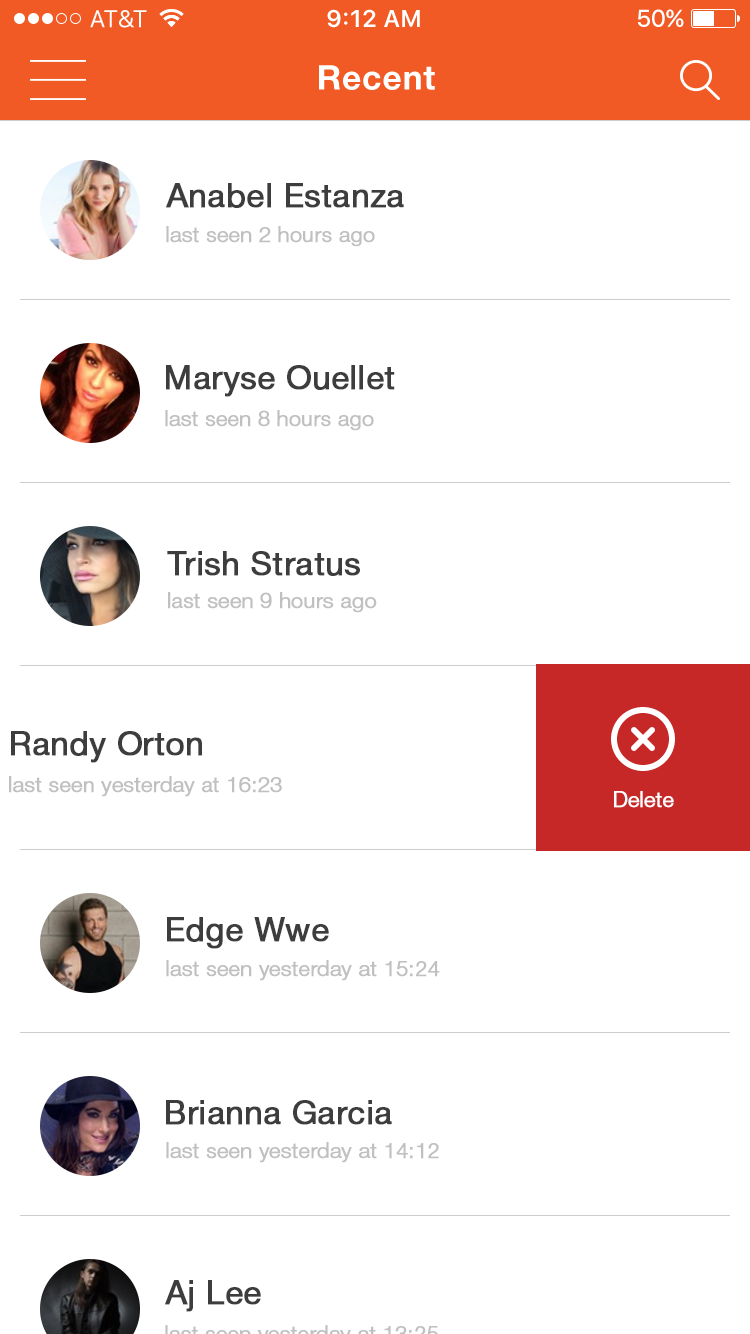
<style>
.page{position:relative;width:750px;height:1334px;background:#ffffff}
.page>*{position:absolute;margin:0}
.t1{font:34px "HelveticaNeueCyr-Bold";letter-spacing:0.02em;color:#ffffff}
.t2{font:32.9px "HelveticaNeueCyr-Roman";color:#3d3d3d;font-weight:bold}
.t3{font:21.4px "HelveticaNeueCyr-Light";color:#c0c0c0;font-weight:bold}
.t4{font:21.4px "HelveticaNeueCyr-Light";color:#ffffff;font-weight:bold}
</style>
<div class="page">
<p class="t1" style="left:319px;top:65px;width:116px;height:25px">Recent</p>
<p class="t2" style="left:166px;top:183px;width:238px;height:25px">Anabel Estanza</p>
<p class="t3" style="left:166px;top:226px;width:209px;height:21px">last seen 2 hours ago</p>
<p class="t2" style="left:166px;top:365px;width:229px;height:32px">Maryse Ouellet</p>
<p class="t3" style="left:165px;top:410px;width:209px;height:21px">last seen 8 hours ago</p>
<p class="t2" style="left:167px;top:551px;width:193px;height:25px">Trish Stratus</p>
<p class="t3" style="left:168px;top:592px;width:209px;height:21px">last seen 9 hours ago</p>
<p class="t2" style="left:11px;top:731px;width:191px;height:32px">Randy Orton</p>
<p class="t3" style="left:9px;top:776px;width:273px;height:21px">last seen yesterday at 16:23</p>
<p class="t4" style="left:614px;top:791px;width:60px;height:17px">Delete</p>
<p class="t2" style="left:167px;top:917px;width:162px;height:32px">Edge Wwe</p>
<p class="t3" style="left:166px;top:960px;width:274px;height:21px">last seen yesterday at 15:24</p>
<p class="t2" style="left:166px;top:1100px;width:226px;height:25px">Brianna Garcia</p>
<p class="t3" style="left:166px;top:1142px;width:273px;height:21px">last seen yesterday at 14:12</p>
<p class="t2" style="left:165px;top:1280px;width:96px;height:32px">Aj Lee</p>
</div>
